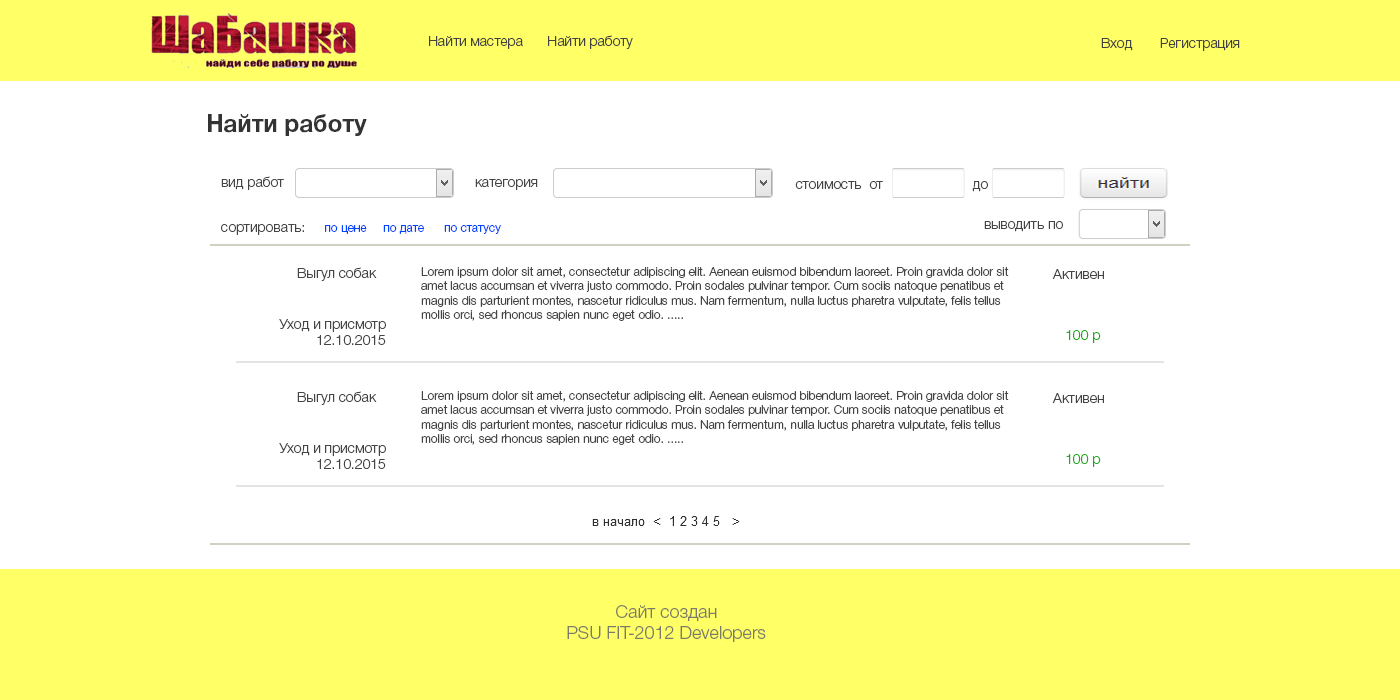
<style>
.page{position:relative;width:1400px;height:700px;background:#ffffff}
.page>*{position:absolute;margin:0}
.t1{font:14px "HelveticaNeueCyr-Light";color:#444241}
.t2{font:24px "HelveticaNeueCyr-Bold";color:#333333}
.t3{font:14px "HelveticaNeueCyr-Light";color:#444444}
.t4{font:12px "HelveticaNeueCyr-Light";color:#0042fe}
.t5{font:12px "HelveticaNeueCyr-Light";color:#444444}
.t6{font:14px "HelveticaNeueCyr-Light";color:#1aab17}
.t7{font:18px "HelveticaNeueCyr-Light";color:#7c7a6a}
</style>
<div class="page">
<p class="t1" style="left:429px;top:36px;width:94px;height:13px">Найти мастера</p>
<p class="t1" style="left:548px;top:35px;width:85px;height:14px">Найти работу</p>
<p class="t1" style="left:1101px;top:38px;width:139px;height:13px">Вход       Регистрация</p>
<p class="t2" style="left:208px;top:114px;width:159px;height:22px">Найти работу</p>
<p class="t3" style="left:221px;top:176px;width:63px;height:14px">вид работ</p>
<p class="t3" style="left:475px;top:179px;width:63px;height:11px">категория</p>
<p class="t3" style="left:795px;top:181px;width:193px;height:11px">стоимость  от                       до</p>
<p class="t3" style="left:984px;top:221px;width:79px;height:11px">выводить по</p>
<p class="t4" style="left:221px;top:224px;width:280px;height:11px"><span class="t3">сортировать:     </span>по цене     по дате      по статусу</p>
<p class="t3" style="left:297px;top:267px;width:80px;height:14px">Выгул собак</p>
<p class="t5" style="left:421px;top:267px;width:588px;height:54px">Lorem ipsum dolor sit amet, consectetur adipiscing elit. Aenean euismod bibendum laoreet. Proin gravida dolor sit amet lacus accumsan et viverra justo commodo. Proin sodales pulvinar tempor. Cum sociis natoque penatibus et magnis dis parturient montes, nascetur ridiculus mus. Nam fermentum, nulla luctus pharetra vulputate, felis tellus mollis orci, sed rhoncus sapien nunc eget odio. .....</p>
<p class="t3" style="left:1052px;top:269px;width:52px;height:10px">Активен</p>
<p class="t3" style="left:279px;top:319px;width:107px;height:26px;text-align:right">Уход и присмотр<br>12.10.2015</p>
<p class="t6" style="left:1066px;top:330px;width:35px;height:13px">100 р</p>
<p class="t3" style="left:297px;top:391px;width:80px;height:14px">Выгул собак</p>
<p class="t5" style="left:421px;top:391px;width:588px;height:54px">Lorem ipsum dolor sit amet, consectetur adipiscing elit. Aenean euismod bibendum laoreet. Proin gravida dolor sit amet lacus accumsan et viverra justo commodo. Proin sodales pulvinar tempor. Cum sociis natoque penatibus et magnis dis parturient montes, nascetur ridiculus mus. Nam fermentum, nulla luctus pharetra vulputate, felis tellus mollis orci, sed rhoncus sapien nunc eget odio. .....</p>
<p class="t3" style="left:1052px;top:393px;width:52px;height:10px">Активен</p>
<p class="t3" style="left:279px;top:443px;width:107px;height:26px;text-align:right">Уход и присмотр<br>12.10.2015</p>
<p class="t6" style="left:1066px;top:454px;width:35px;height:13px">100 р</p>
<p class="t7" style="left:567px;top:605px;width:199px;height:37px;text-align:center">Сайт создан<br>PSU FIT-2012 Developers</p>
</div>
